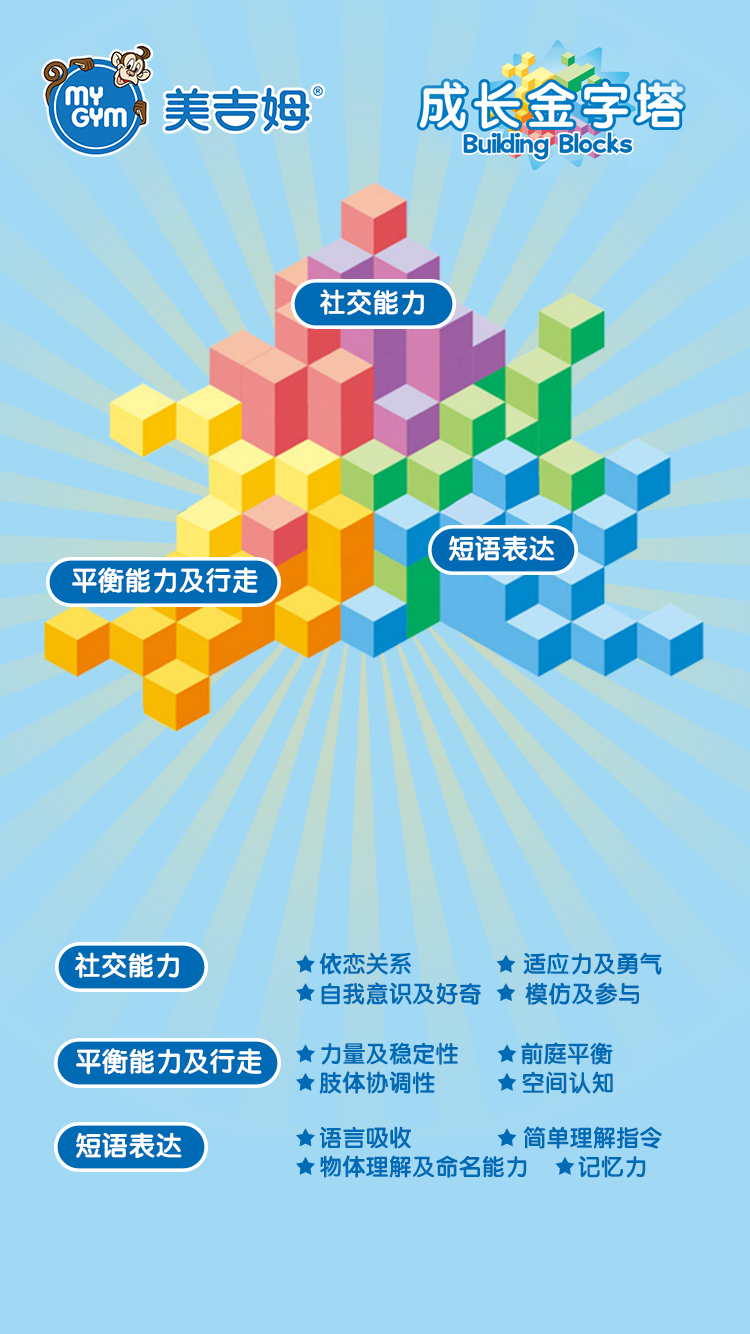
<style>
.page{position:relative;width:750px;height:1334px;background:#a1d9f5}
.page>*{position:absolute;margin:0}
.t1{font:27.2px "FZY4JW--GB1-0";color:#ffffff}
.t2{font:23.5px/34px "FZY4JW--GB1-0";color:#006ab4}
</style>
<div class="page">
<p class="t1" style="left:320px;top:289px;width:104px;height:26px">社交能力</p>
<p class="t1" style="left:449px;top:535px;width:106px;height:26px">短语表达</p>
<p class="t1" style="left:72px;top:567px;width:186px;height:27px">平衡能力及行走</p>
<p class="t1" style="left:75px;top:952px;width:104px;height:26px">社交能力</p>
<p class="t2" style="left:319px;top:952px;width:343px;height:53px">依恋关系                  适应力及勇气<br>自我意识及好奇       模仿及参与</p>
<p class="t1" style="left:76px;top:1048px;width:186px;height:27px">平衡能力及行走</p>
<p class="t2" style="left:319px;top:1042px;width:294px;height:52px">力量及稳定性          前庭平衡<br>肢体协调性              空间认知</p>
<p class="t1" style="left:76px;top:1132px;width:106px;height:26px">短语表达</p>
<p class="t2" style="left:319px;top:1126px;width:343px;height:52px">语言吸收                  简单理解指令<br>物体理解及命名能力        记忆力</p>
</div>
